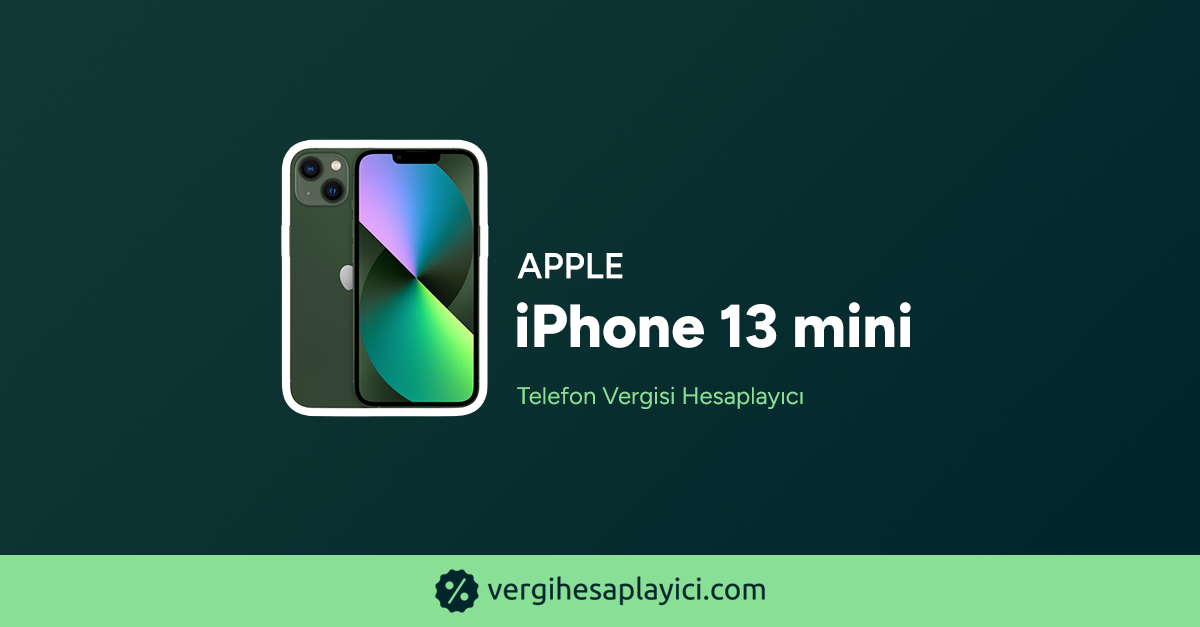
<style>
.page{position:relative;width:1200px;height:627px}
.page>*{position:absolute;margin:0}
.t1{font:36px "Figtree-SemiBold";color:#ffffff;text-transform:uppercase;font-weight:bold}
.t2{font:60.3px "Figtree-ExtraBold";color:#ffffff;font-weight:bold}
.t3{font:24px "Figtree-Regular";color:#88df95;font-weight:bold}
</style>
<div class="page">
<p class="t1" style="left:517px;top:253px;width:106px;height:26px">Apple</p>
<p class="t2" style="left:517px;top:302px;width:394px;height:46px">iPhone 13 mini</p>
<p class="t3" style="left:517px;top:386px;width:286px;height:23px">Telefon Vergisi Hesaplayıcı</p>
</div>
